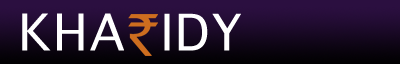
<style>
.page{position:relative;width:400px;height:64px}
.page>*{position:absolute;margin:0}
.t1{font:68px "AppleSymbols";letter-spacing:0.04em;color:#ffffff}
</style>
<div class="page">
<p class="t1" style="left:22px;top:13px;width:102px;height:38px">KHA</p>
<p class="t1" style="left:164px;top:13px;width:77px;height:38px">IDY</p>
</div>
